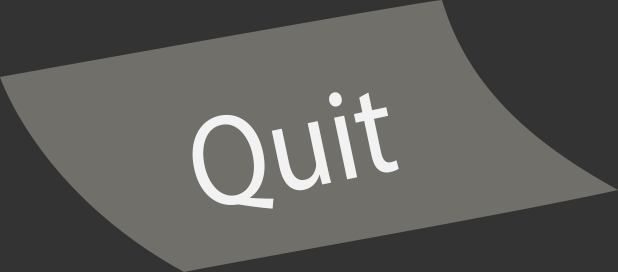
<style>
.page{position:relative;width:618px;height:272px;background:#706f69}
.page>*{position:absolute;margin:0}
.t1{font:129.8px "MyriadPro-Regular";color:#f2f2f2;scale:0.88 1}
</style>
<div class="page">
<p class="t1" style="left:192px;top:92px;width:207px;height:117px;rotate:-12deg">Quit</p>
</div>
